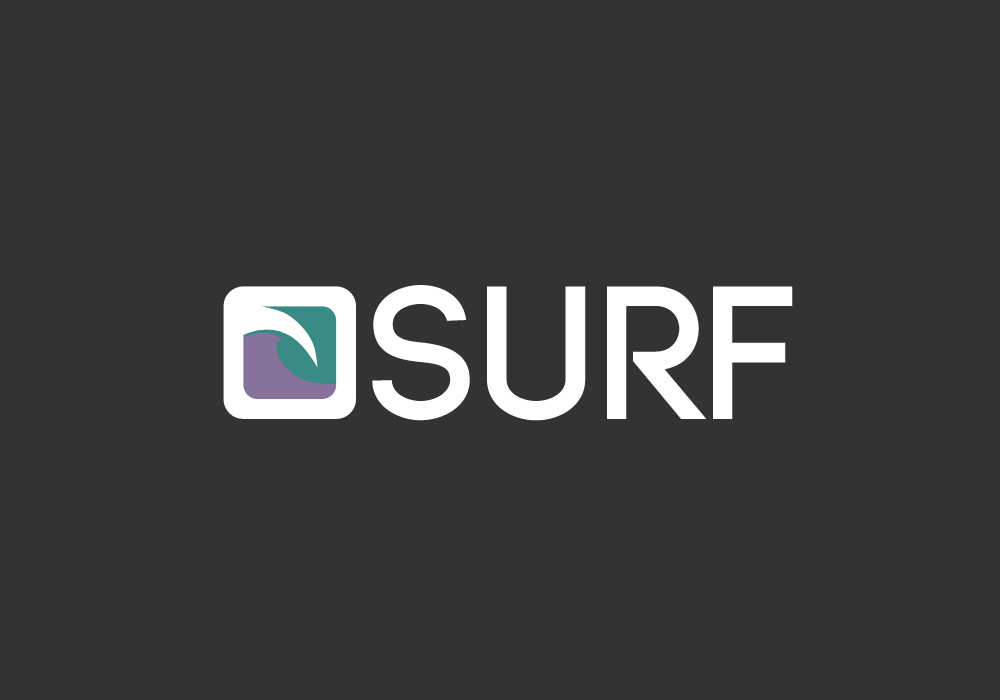
<style>
.page{position:relative;width:1000px;height:700px;background:#333333}
.page>*{position:absolute;margin:0}
.t1{font:189.4px "Code-Pro-Demo";color:#ffffff}
</style>
<div class="page">
<p class="t1" style="left:372px;top:285px;width:421px;height:136px">SURF</p>
</div>
